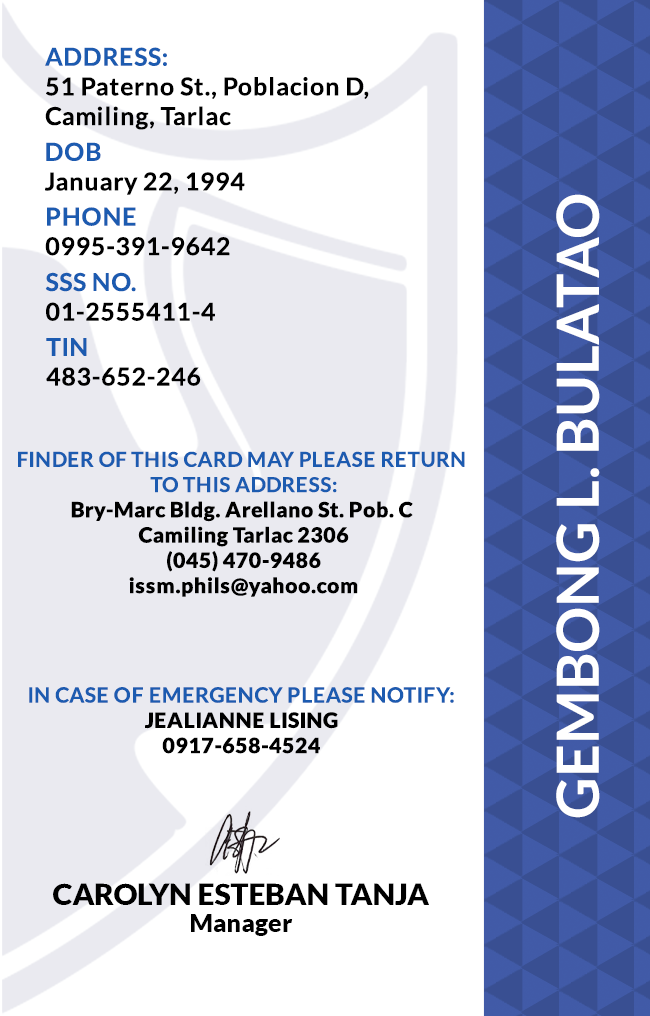
<style>
.page{position:relative;width:650px;height:1016px;background:#ffffff}
.page>*{position:absolute;margin:0}
.t1{font:24.7px/29.6px "Lato-Bold";letter-spacing:0.025em;color:#000000}
.t2{font:24.7px/29.6px "Lato-Bold";letter-spacing:0.025em;color:#1c5bb0}
.t3{font:58.3px "Lato-Bold";color:#ffffff}
.t4{font:21.1px "Lato-Black";letter-spacing:0.025em}
.t5{font:20.5px/25.3px "Lato-Bold";letter-spacing:0.025em;text-transform:uppercase}
.t6{font:21.1px/25.3px "Lato-Bold";letter-spacing:0.025em;color:#1c5bb0}
.t7{font:21.1px "Lato-Black";letter-spacing:0.025em;color:#000000}
.t8{font:29.5px "Lato-Black";color:#000000}
.t9{font:25px "Lato-Black";color:#000000}
</style>
<div class="page">
<p class="t1" style="left:45px;top:47px;width:324px;height:83px"><span class="t2">ADDRESS:<br></span>51 Paterno St., Poblacion D,<br>Camiling, Tarlac</p>
<p class="t1" style="left:45px;top:142px;width:200px;height:53px"><span class="t2">DOB<br></span>January 22, 1994</p>
<p class="t3" style="left:556px;top:194px;width:44px;height:624px;rotate:-90deg">GEMBONG L. BULATAO</p>
<p class="t1" style="left:45px;top:207px;width:185px;height:49px"><span class="t2">PHONE <br></span>0995-391-9642</p>
<p class="t1" style="left:45px;top:272px;width:170px;height:49px"><span class="t2">SSS NO.<br></span>01-2555411-4</p>
<p class="t1" style="left:46px;top:338px;width:155px;height:48px"><span class="t2">TIN<br></span>483-652-246</p>
<p class="t4" style="left:18px;top:451px;width:447px;height:146px;text-align:center"><span class="t5">Finder of this card may please return <br>to this address:<br></span>Bry-Marc Bldg. Arellano St. Pob. C <br>Camiling Tarlac 2306<br>(045) 470-9486<br>issm.phils@yahoo.com</p>
<p class="t6" style="left:29px;top:687px;width:425px;height:67px;text-align:center">IN CASE OF EMERGENCY PLEASE NOTIFY:<br><span class="t7">JEALIANNE LISING<br>0917-658-4524</span></p>
<p class="t8" style="left:53px;top:883px;width:376px;height:22px">CAROLYN ESTEBAN TANJA</p>
<p class="t9" style="left:191px;top:914px;width:102px;height:22px">Manager</p>
</div>
